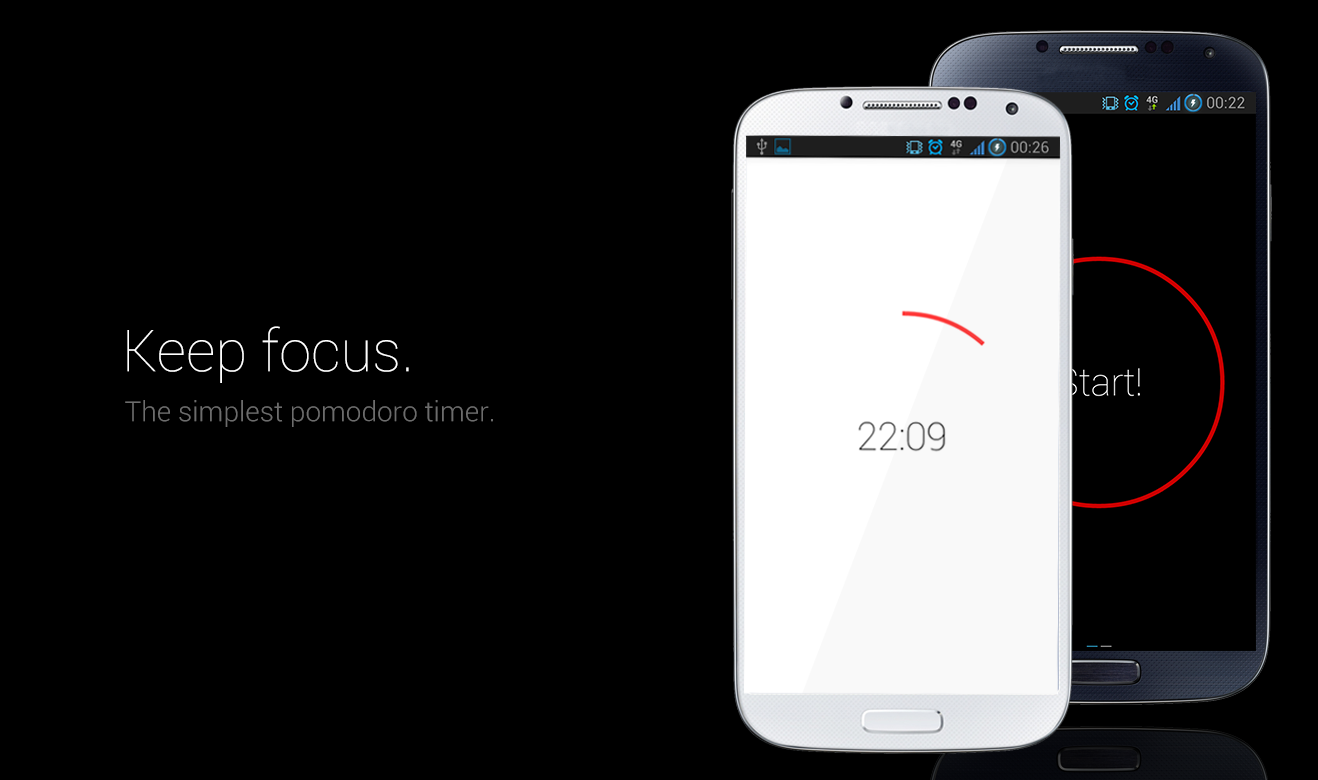
<style>
.page{position:relative;width:1318px;height:780px;background:#000000}
.page>*{position:absolute;margin:0}
.t1{font:58px "Roboto-Thin";color:#ffffff}
.t2{font:28px "Roboto-Light";color:#6c6c6c}
</style>
<div class="page">
<p class="t1" style="left:127px;top:326px;width:282px;height:57px">Keep focus.</p>
<p class="t2" style="left:125px;top:400px;width:368px;height:27px">The simplest pomodoro timer.</p>
</div>
